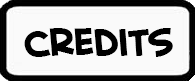
<style>
.page{position:relative;width:195px;height:81px;background:#fafafa}
.page>*{position:absolute;margin:0}
.t1{font:38px "CreativeBlockBBBold";letter-spacing:-0.05em;color:#000000}
</style>
<div class="page">
<p class="t1" style="left:24px;top:28px;width:149px;height:29px">credits</p>
</div>
